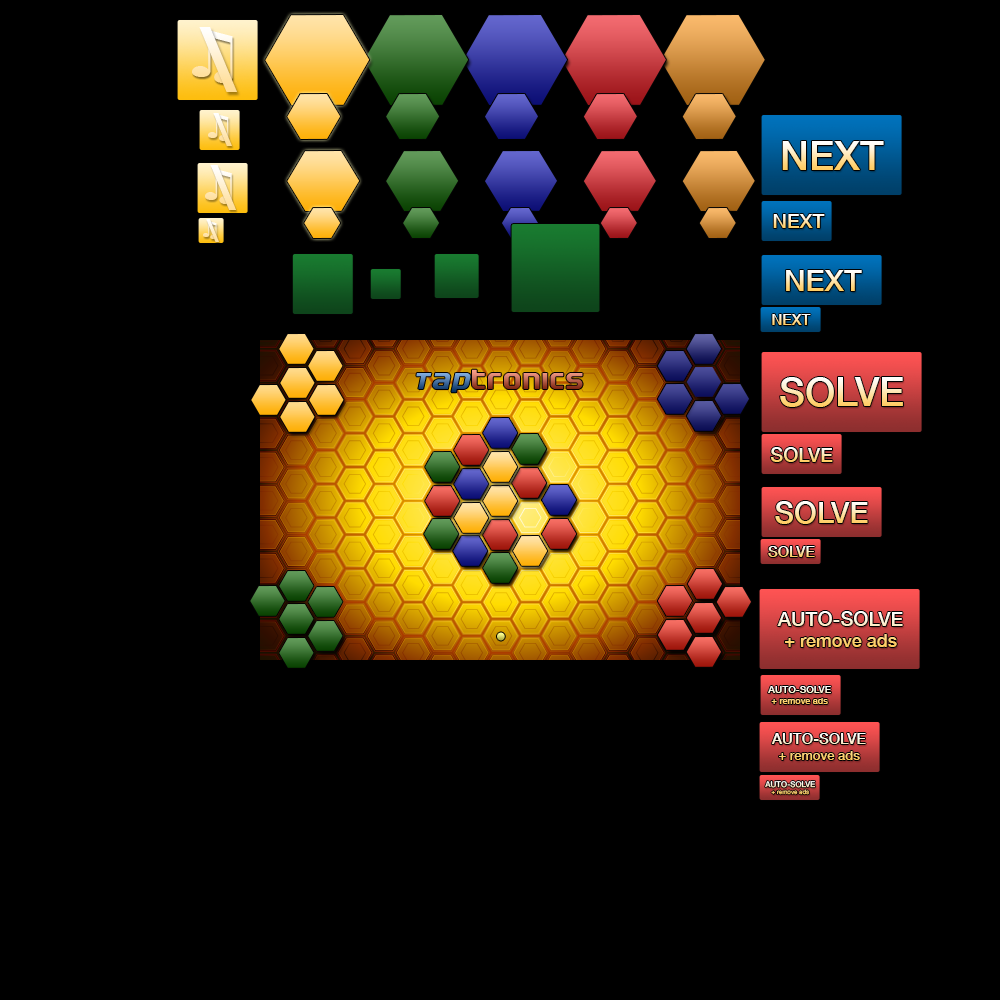
<style>
.page{position:relative;width:1000px;height:1000px;background:#000000}
.page>*{position:absolute;margin:0}
.t1{font:100px "AppleSymbols"}
.t2{font:70px "Verdana-Bold"}
.t3{font:35px "Verdana-Bold"}
.t4{font:50px "AppleSymbols"}
.t5{font:40px "HelveticaNeue-Medium"}
.t6{font:66px "AppleSymbols"}
.t7{font:48px "Verdana-Bold"}
.t8{font:24px "Verdana-Bold"}
.t9{font:20px "HelveticaNeue-Medium"}
.t10{font:30px "HelveticaNeue-Medium"}
.t11{font:15px "HelveticaNeue-Medium"}
.t12{font:24px "Electrofied"}
.t13{font:24px "ElectrofiedItalic"}
.t14{font:18px "HelveticaNeue-Medium"}
.t15{font:30px "MinionPro-Regular"}
.t16{font:9px "HelveticaNeue-Medium"}
.t17{font:10px "HelveticaNeue-Medium"}
.t18{font:13px "HelveticaNeue-Medium"}
.t19{font:6px "HelveticaNeue-Medium"}
.t20{font:8px "HelveticaNeue-Medium"}
</style>
<div class="page">
<p class="t1" style="left:192px;top:30px;width:41px;height:53px">♫</p>
<p class="t2" style="left:199px;top:27px;width:38px;height:65px">\</p>
<p class="t3" style="left:213px;top:113px;width:19px;height:33px">\</p>
<p class="t4" style="left:208px;top:114px;width:21px;height:27px">♫</p>
<p class="t5" style="left:782px;top:141px;width:102px;height:29px">NEXT</p>
<p class="t6" style="left:205px;top:169px;width:27px;height:35px">♫</p>
<p class="t7" style="left:210px;top:165px;width:26px;height:45px">\</p>
<p class="t8" style="left:206px;top:219px;width:13px;height:23px">\</p>
<p class="t9" style="left:773px;top:214px;width:52px;height:14px">NEXT</p>
<p class="t10" style="left:786px;top:270px;width:76px;height:21px">NEXT</p>
<p class="t11" style="left:772px;top:314px;width:39px;height:11px">NEXT</p>
<p class="t12" style="left:416px;top:369px;width:167px;height:24px"><span class="t13">Tap</span>tronics</p>
<p class="t5" style="left:780px;top:377px;width:123px;height:30px">SOLVE</p>
<p class="t9" style="left:770px;top:447px;width:63px;height:15px">SOLVE</p>
<p class="t10" style="left:775px;top:501px;width:93px;height:23px">SOLVE</p>
<p class="t11" style="left:768px;top:546px;width:47px;height:11px">SOLVE</p>
<p class="t14" style="left:777px;top:611px;width:126px;height:36px;text-align:center"><span class="t9">AUTO-SOLVE<br></span>+ remove ads</p>
<p class="t15" style="left:497px;top:632px;width:8px;height:9px">•</p>
<p class="t16" style="left:768px;top:686px;width:63px;height:18px;text-align:center"><span class="t17">AUTO-SOLVE<br></span>+ remove ads</p>
<p class="t18" style="left:771px;top:733px;width:95px;height:27px;text-align:center"><span class="t11">AUTO-SOLVE<br></span>+ remove ads</p>
<p class="t19" style="left:765px;top:781px;width:51px;height:14px;text-align:center"><span class="t20">AUTO-SOLVE<br></span>+ remove ads</p>
</div>
